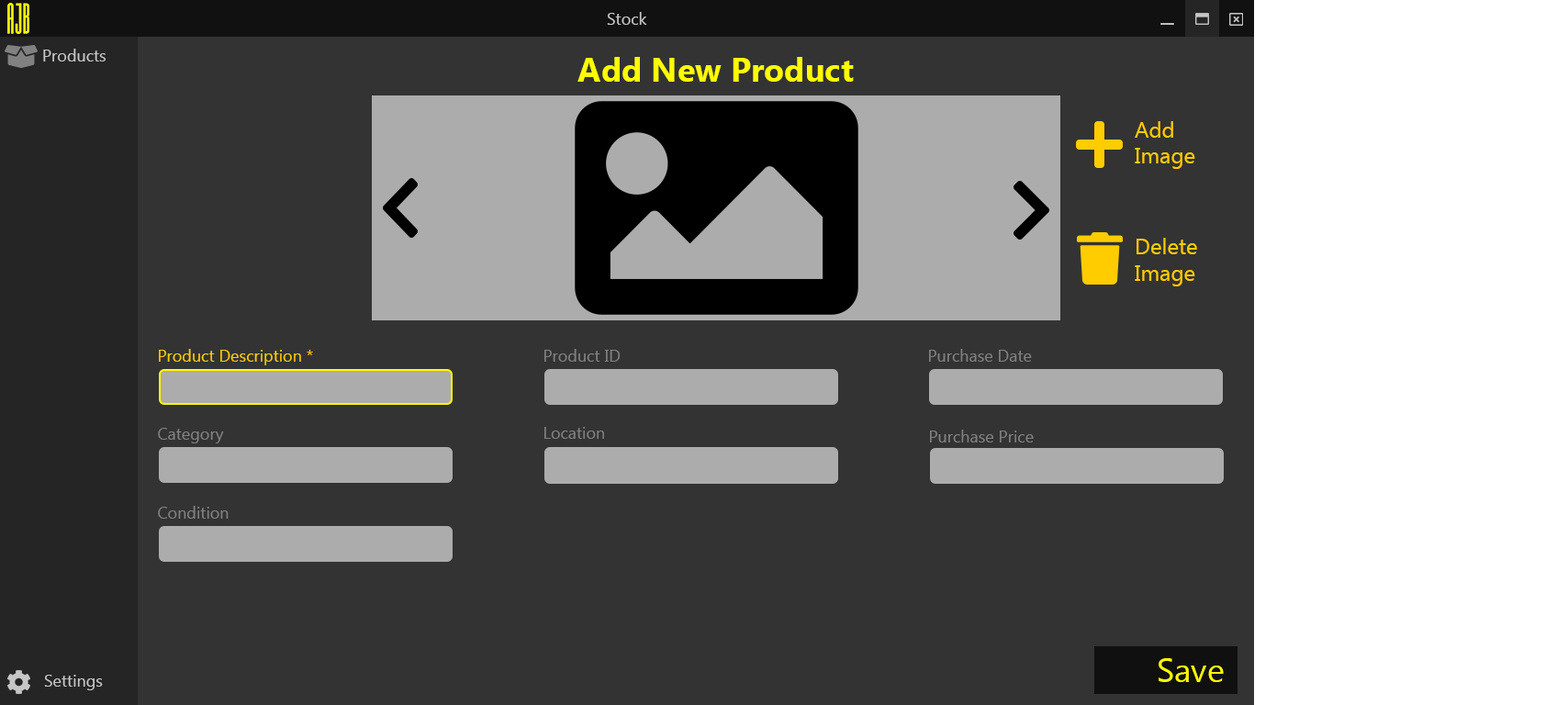
<style>
.page{position:relative;width:1568px;height:705px;background:#333333}
.page>*{position:absolute;margin:0}
.t1{font:16.5px "MicrosoftNewTaiLue";color:#c6c6c6}
.t2{font:33px "MicrosoftNewTaiLue-Bold";color:#fffc00}
.t3{font:22px "MicrosoftNewTaiLue";color:#ffcc00}
.t4{font:16.5px "MicrosoftNewTaiLue";color:#ffcc00}
.t5{font:16.5px "MicrosoftNewTaiLue";color:#818181}
.t6{font:33px "MicrosoftNewTaiLue";color:#fffc00}
</style>
<div class="page">
<p class="t1" style="left:607px;top:12px;width:40px;height:13px">Stock</p>
<p class="t1" style="left:43px;top:49px;width:63px;height:13px">Products</p>
<p class="t2" style="left:577px;top:57px;width:277px;height:25px">Add New Product</p>
<p class="t3" style="left:1135px;top:121px;width:60px;height:48px">Add<br>Image</p>
<p class="t3" style="left:1135px;top:238px;width:62px;height:48px">Delete<br>Image</p>
<p class="t4" style="left:159px;top:349px;width:154px;height:16px">Product Description *</p>
<p class="t5" style="left:544px;top:349px;width:77px;height:13px">Product ID</p>
<p class="t5" style="left:929px;top:349px;width:103px;height:13px">Purchase Date</p>
<p class="t5" style="left:158px;top:428px;width:66px;height:15px">Category</p>
<p class="t5" style="left:544px;top:427px;width:60px;height:12px">Location</p>
<p class="t5" style="left:930px;top:430px;width:104px;height:12px">Purchase Price</p>
<p class="t5" style="left:158px;top:506px;width:71px;height:13px">Condition</p>
<p class="t6" style="left:1159px;top:658px;width:65px;height:24px">Save</p>
<p class="t1" style="left:44px;top:675px;width:59px;height:15px">Settings</p>
</div>
